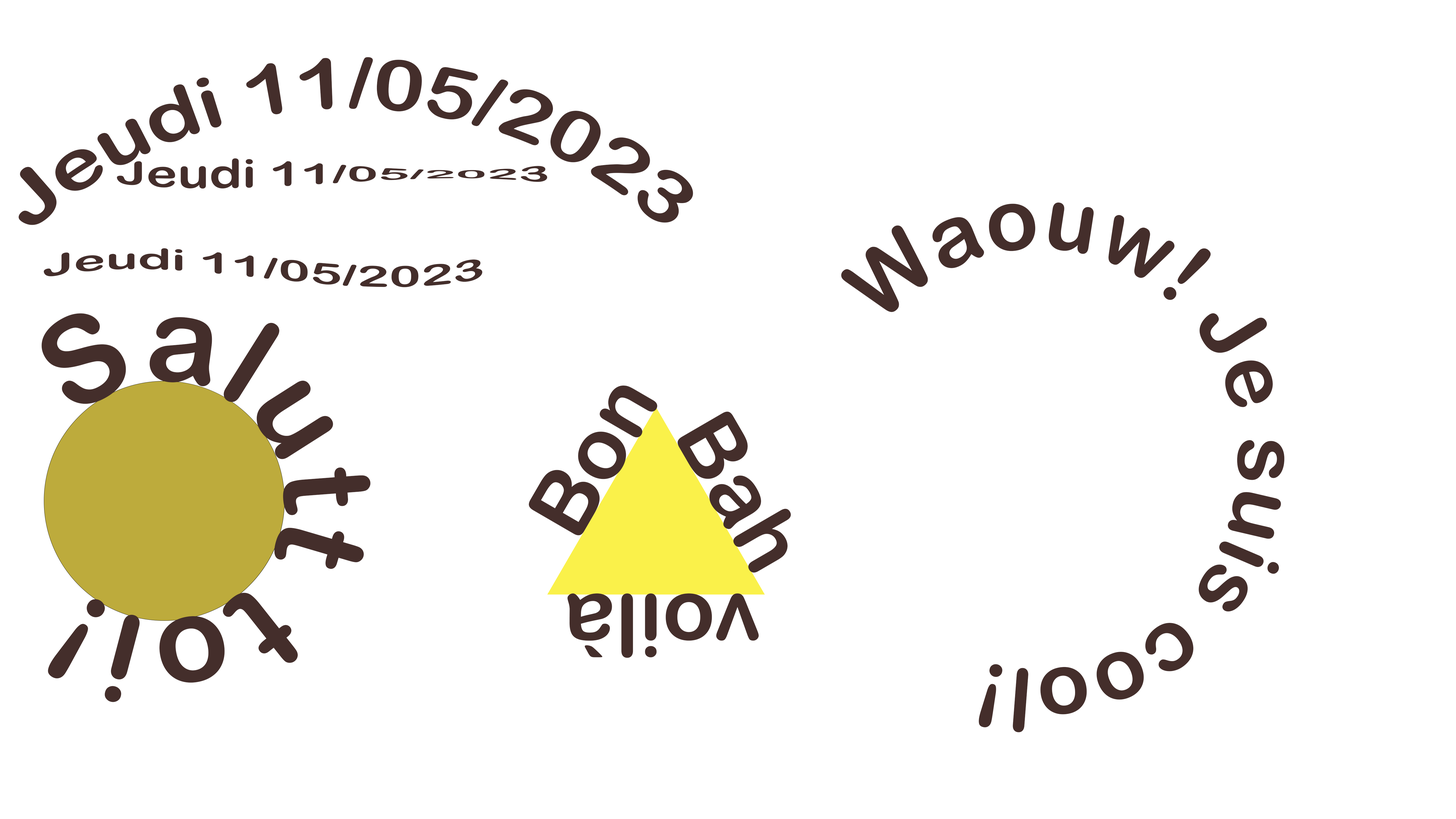
<style>
.page{position:relative;width:1456px;height:819px;background:#ffffff}
.page>*{position:absolute;margin:0}
.t1{font:70.2px "ArialRoundedMTBold";color:#442e2b;scale:1.06 1}
.t2{font:26.2px "ArialRoundedMTBold";color:#442e2b;scale:2.01 1}
.t3{font:86.9px "ArialRoundedMTBold";color:#442e2b}
.t4{font:29.2px "ArialRoundedMTBold";color:#442e2b;scale:1.84 1}
.t5{font:122px "ArialRoundedMTBold";color:#442e2b}
</style>
<div class="page">
<p class="t1" style="left:18px;top:57px;width:675px;height:168px">Jeudi 11/05/2023</p>
<p class="t2" style="left:117px;top:158px;width:430px;height:31px">Jeudi 11/05/2023</p>
<p class="t3" style="left:841px;top:202px;width:444px;height:530px">Waouw! Je suis cool!</p>
<p class="t4" style="left:44px;top:248px;width:438px;height:39px">Jeudi 11/05/2023</p>
<p class="t5" style="left:41px;top:313px;width:330px;height:389px">Salutt toi!</p>
<p class="t3" style="left:529px;top:385px;width:262px;height:273px">Bon Bah voilà</p>
</div>
